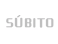
<style>
.page{position:relative;width:58px;height:44px;background:#ffffff}
.page>*{position:absolute;margin:0}
.t1{font:11.3px "AokaneStd-EB";letter-spacing:0.035em;color:#bfbfbf;font-weight:bold}
</style>
<div class="page">
<p class="t1" style="left:6px;top:15px;width:48px;height:13px">SÚBITO</p>
</div>
